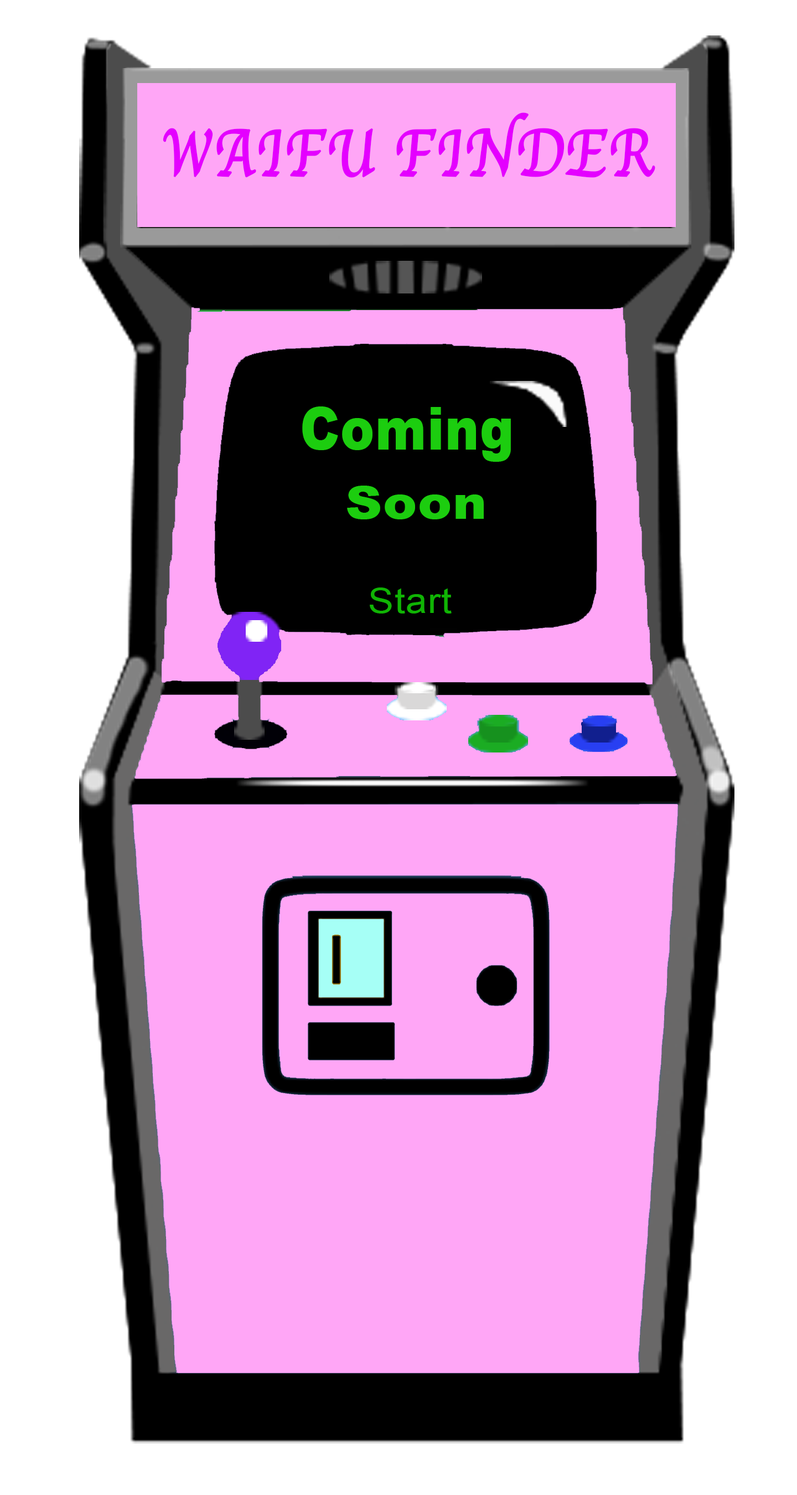
<style>
.page{position:relative;width:797px;height:1495px;background:#ffa6f6}
.page>*{position:absolute;margin:0}
.t1{font:69.2px "Apple-Chancery";letter-spacing:0.02em;color:#e400ff;font-weight:bold;scale:0.8 1}
.t2{font:60px/23.1px "Arial-Black";letter-spacing:0.02em;color:#1ccd0f;scale:0.85 1}
.t3{font:46.2px/23.1px "Arial-Black";letter-spacing:0.02em;color:#1ccd0f;scale:1.1 1}
.t4{font:34.6px "ArialMT";letter-spacing:0.02em;color:#10b404;scale:1.1 1}
</style>
<div class="page">
<p class="t1" style="left:163px;top:112px;width:493px;height:66px">WAIFU FINDER</p>
<p class="t2" style="left:302px;top:406px;width:209px;height:113px;text-align:center">Coming<br><br><br> <span class="t3">Soon</span></p>
<p class="t4" style="left:370px;top:588px;width:82px;height:26px">Start</p>
</div>
